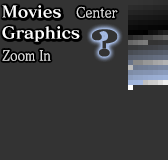
<style>
.page{position:relative;width:168px;height:160px;background:#333333}
.page>*{position:absolute;margin:0}
.t1{font:16px/21px "MatisseProN-B";color:#ffffff;scale:1.05 1}
.t2{font:14px "MatissePro-M";color:#dbdbdb;scale:0.9 1}
.t3{font:14px "MatissePro-M";color:#dbdbdb;scale:0.88 1}
.t4{font:14px "MatissePro-M";letter-spacing:-0.01em;color:#dbdbdb;scale:0.84 1}
.t5{font:14px "MatissePro-M";letter-spacing:-0.01em;color:#dbdbdb;scale:0.88 1}
</style>
<div class="page">
<p class="t1" style="left:2px;top:5px;width:78px;height:37px">Movies<br>Graphics</p>
<p class="t2" style="left:76px;top:6px;width:42px;height:12px">Center</p>
<p class="t3" style="left:2px;top:50px;width:49px;height:11px"><span class="t4">Z</span>oo<span class="t5">m </span><span class="t4">In</span></p>
</div>
